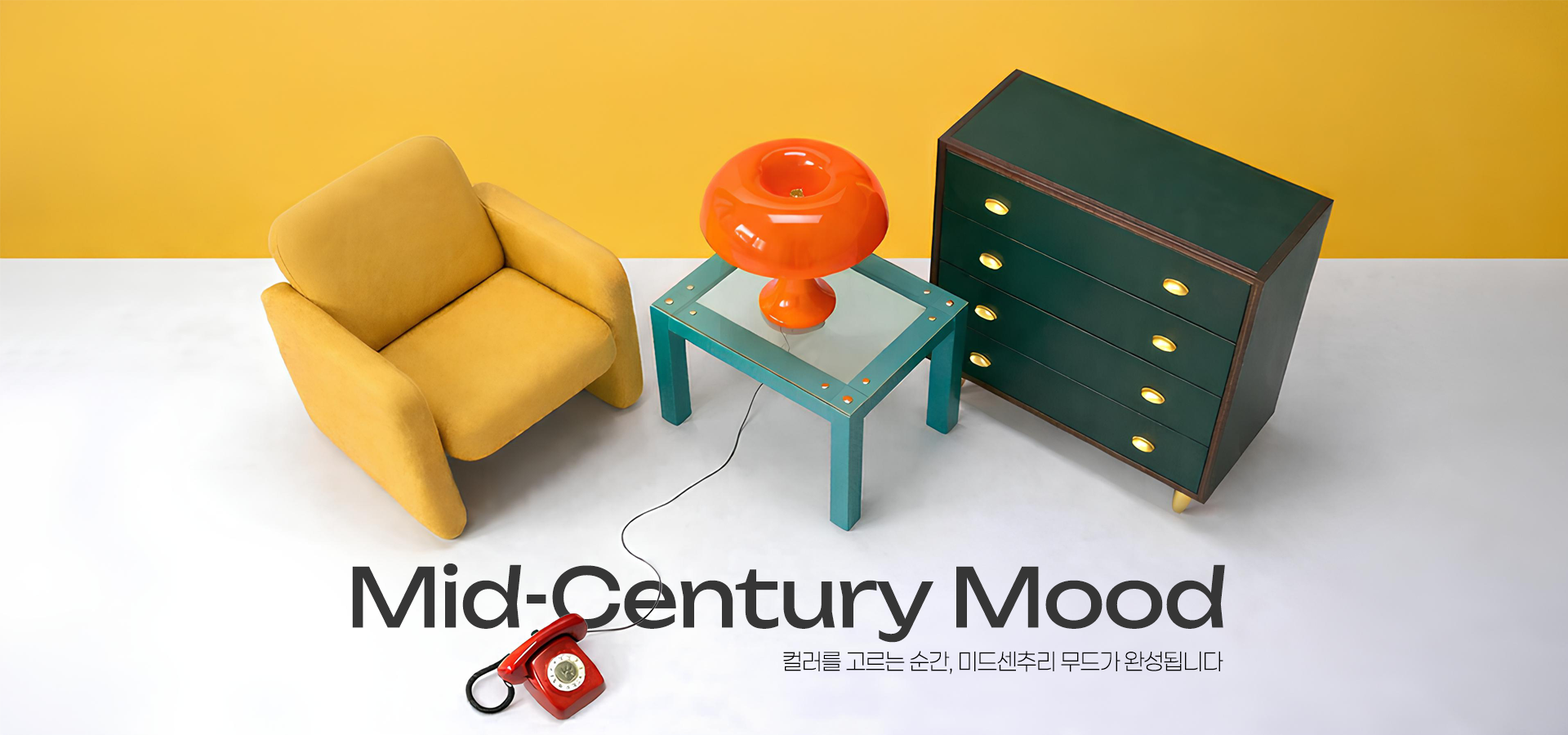
<style>
.page{position:relative;width:1568px;height:735px}
.page>*{position:absolute;margin:0}
.t1{font:81.1px "Unbounded-Regular";letter-spacing:-0.02em;color:#363636}
.t2{font:22.9px "Paperlogy-2ExtraLight";letter-spacing:-0.02em;color:#000000}
</style>
<div class="page">
<p class="t1" style="left:352px;top:564px;width:873px;height:79px">Mid-Century Mood</p>
<p class="t2" style="left:783px;top:651px;width:440px;height:24px">컬러를 고르는 순간, 미드센추리 무드가 완성됩니다</p>
</div>
